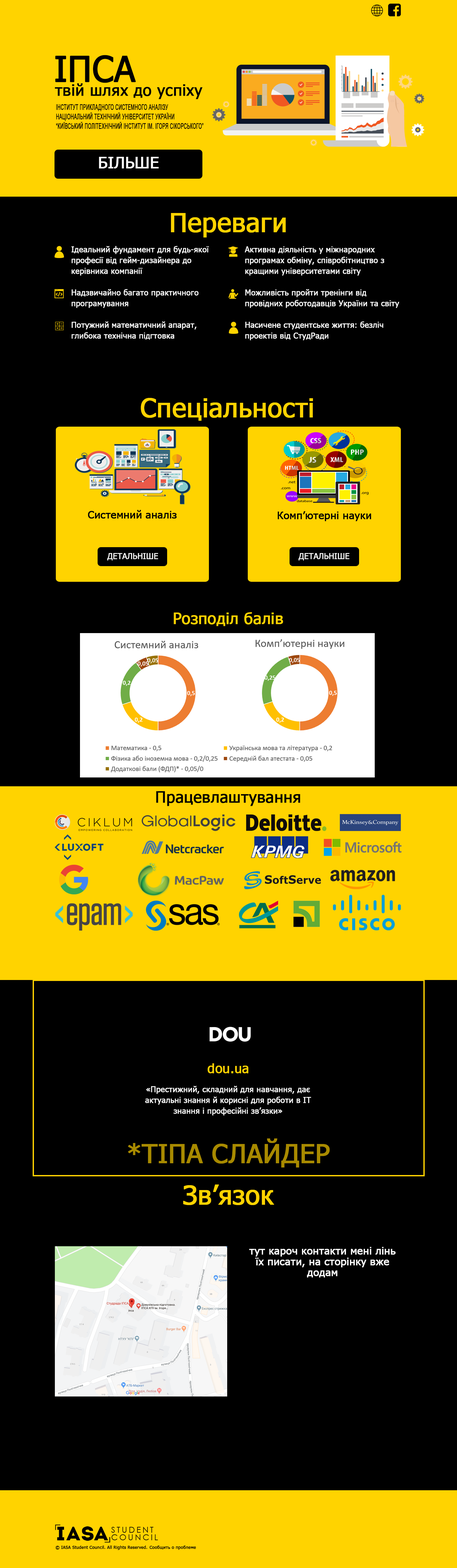
<style>
.page{position:relative;width:457px;height:1568px;background:#000000}
.page>*{position:absolute;margin:0}
.t1{font:34.8px "Tahoma";color:#000000;font-weight:bold}
.t2{font:15.7px "Tahoma";color:#000000;font-weight:bold}
.t3{font:7.8px "ArialMT";color:#000000;font-weight:bold;scale:0.56 1}
.t4{font:15.7px "Tahoma";color:#ffffff;font-weight:bold}
.t5{font:26.1px "Tahoma";color:#ffd300;font-weight:bold}
.t6{font:7.8px/10.8px "Tahoma";color:#ffffff;font-weight:bold}
.t7{font:10.5px "Tahoma";color:#000000;font-weight:bold}
.t8{font:7.8px "Tahoma";color:#ffffff;font-weight:bold}
.t9{font:15.7px "Tahoma";color:#ffd300;font-weight:bold}
.t10{font:13.1px "Tahoma";color:#ffd300;font-weight:bold}
.t11{font:26.1px "Tahoma";color:#a88a00;font-weight:bold}
.t12{font:10.5px/10.8px "Tahoma";color:#ffffff;font-weight:bold}
.t13{font:4.4px "Tahoma";color:#000000;font-weight:bold}
</style>
<div class="page">
<p class="t1" style="left:55px;top:55px;width:81px;height:28px">ІПСА</p>
<p class="t2" style="left:55px;top:83px;width:148px;height:16px">твій шлях до успіху</p>
<p class="t3" style="left:56px;top:104px;width:148px;height:25px">ІНСТИТУТ ПРИКЛАДНОГО СИСТЕМНОГО АНАЛІЗУ<br>НАЦІОНАЛЬНИЙ ТЕХНІЧНИЙ УНІВЕРСИТЕТ УКРАЇНИ<br>“КИЇВСЬКИЙ ПОЛІТЕХНІЧНИЙ ІНСТИТУТ ІМ. ІГОРЯ СІКОРСЬКОГО”</p>
<p class="t4" style="left:99px;top:157px;width:60px;height:12px">БІЛЬШЕ</p>
<p class="t5" style="left:171px;top:213px;width:115px;height:24px">Переваги</p>
<p class="t6" style="left:72px;top:246px;width:137px;height:94px">Ідеальний фундамент для будь-якої професії від гейм-дизайнера до керівника компанії<br><br>Надзвичайно багато практичного програмування<br><br>Потужний математичний апарат, глибока технічна підгтовка</p>
<p class="t6" style="left:245px;top:246px;width:155px;height:94px">Активна діяльність у міжнародних програмах обміну, співробітництво з кращими університетами світу<br><br>Можливість пройти тренінги від провідних роботодавців України та світу<br><br>Насичене студентське життя: безліч проектів від СтудРади</p>
<p class="t5" style="left:141px;top:398px;width:172px;height:23px">Спеціальності</p>
<p class="t7" style="left:88px;top:510px;width:89px;height:9px">Системний аналіз</p>
<p class="t7" style="left:278px;top:511px;width:93px;height:10px">Комп’ютерні науки</p>
<p class="t8" style="left:107px;top:553px;width:51px;height:8px">ДЕТАЛЬНІШЕ</p>
<p class="t8" style="left:299px;top:553px;width:51px;height:8px">ДЕТАЛЬНІШЕ</p>
<p class="t9" style="left:174px;top:612px;width:110px;height:14px">Розподіл балів</p>
<p class="t2" style="left:156px;top:791px;width:145px;height:15px">Працевлаштування</p>
<p class="t10" style="left:208px;top:1063px;width:41px;height:10px">dou.ua</p>
<p class="t6" style="left:145px;top:1086px;width:166px;height:30px;text-align:center">«Престижний, складний для навчання, дає актуальні знання й корисні для роботи в ІТ знання і професійні зв’язки»</p>
<p class="t11" style="left:128px;top:1138px;width:202px;height:30px">*ТІПА СЛАЙДЕР</p>
<p class="t5" style="left:183px;top:1184px;width:91px;height:21px">Зв’язок</p>
<p class="t12" style="left:249px;top:1247px;width:147px;height:31px;text-align:center">тут кароч контакти мені лінь їх писати, на сторінку вже додам</p>
<p class="t13" style="left:56px;top:1545px;width:140px;height:5px">© IASA Student Council. All Rights Reserved. Сообщить о проблеме</p>
</div>
